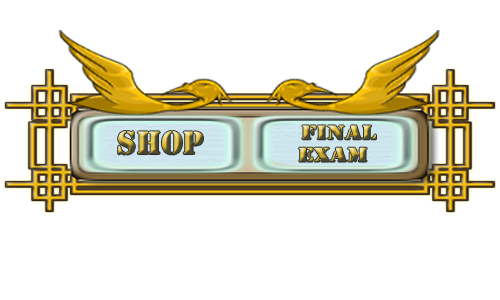
<style>
.page{position:relative;width:500px;height:300px;background:#ffffff}
.page>*{position:absolute;margin:0}
.t1{font:18.5px "StencilStd";scale:1.3 1}
.t2{font:30.1px "StencilStd"}
</style>
<div class="page">
<p class="t1" style="left:299px;top:125px;width:77px;height:37px">Final<br> Exam</p>
<p class="t2" style="left:118px;top:131px;width:85px;height:24px">SHOP</p>
</div>
